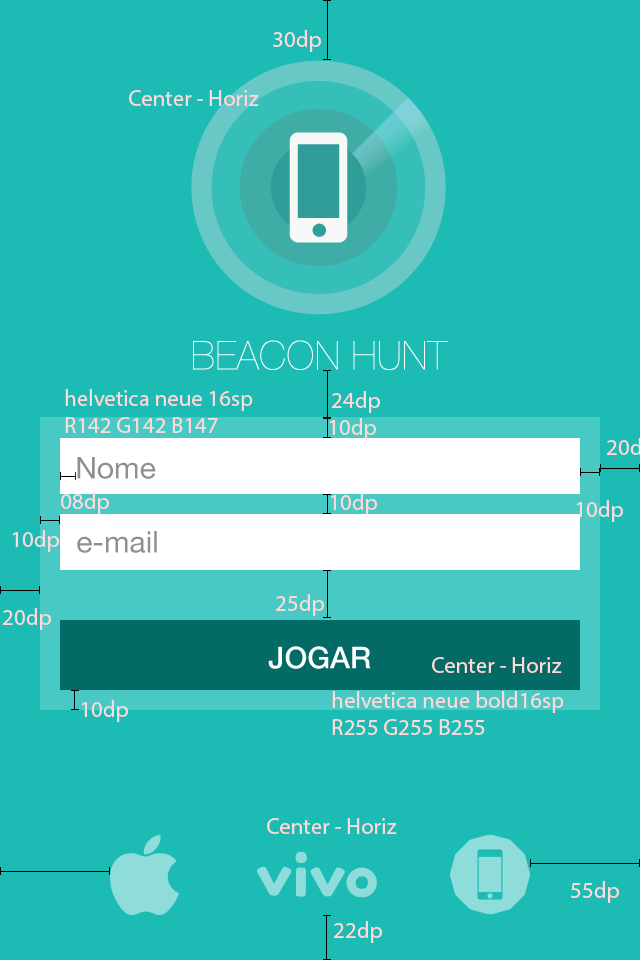
<style>
.page{position:relative;width:640px;height:960px;background:#1cbbb4}
.page>*{position:absolute;margin:0}
.t1{font:22.8px "MyriadPro-Regular";color:#fed9d9}
.t2{font:30px "HelveticaNeue";color:#8e8e93}
.t3{font:30px "Helvetica65-Medium";color:#ffffff}
</style>
<div class="page">
<p class="t1" style="left:273px;top:30px;width:48px;height:22px">30dp</p>
<p class="t1" style="left:129px;top:90px;width:130px;height:16px">Center - Horiz</p>
<p class="t1" style="left:65px;top:389px;width:188px;height:44px">helvetica neue 16sp<br>R142 G142 B147</p>
<p class="t1" style="left:331px;top:391px;width:49px;height:22px">24dp</p>
<p class="t1" style="left:329px;top:418px;width:47px;height:22px">10dp</p>
<p class="t2" style="left:77px;top:457px;width:79px;height:22px">Nome</p>
<p class="t1" style="left:61px;top:492px;width:48px;height:22px">08dp</p>
<p class="t1" style="left:330px;top:493px;width:47px;height:22px">10dp</p>
<p class="t1" style="left:576px;top:500px;width:47px;height:22px">10dp</p>
<p class="t1" style="left:12px;top:530px;width:47px;height:22px">10dp</p>
<p class="t2" style="left:77px;top:531px;width:80px;height:22px">e-mail</p>
<p class="t1" style="left:275px;top:594px;width:49px;height:22px">25dp</p>
<p class="t1" style="left:2px;top:608px;width:49px;height:22px">20dp</p>
<p class="t3" style="left:268px;top:646px;width:103px;height:23px">JOGAR</p>
<p class="t1" style="left:432px;top:657px;width:130px;height:16px">Center - Horiz</p>
<p class="t1" style="left:81px;top:700px;width:47px;height:22px">10dp</p>
<p class="t1" style="left:332px;top:691px;width:232px;height:44px">helvetica neue bold16sp<br>R255 G255 B255</p>
<p class="t1" style="left:267px;top:818px;width:130px;height:16px">Center - Horiz</p>
<p class="t1" style="left:571px;top:881px;width:48px;height:22px">55dp</p>
<p class="t1" style="left:333px;top:921px;width:49px;height:22px">22dp</p>
</div>
